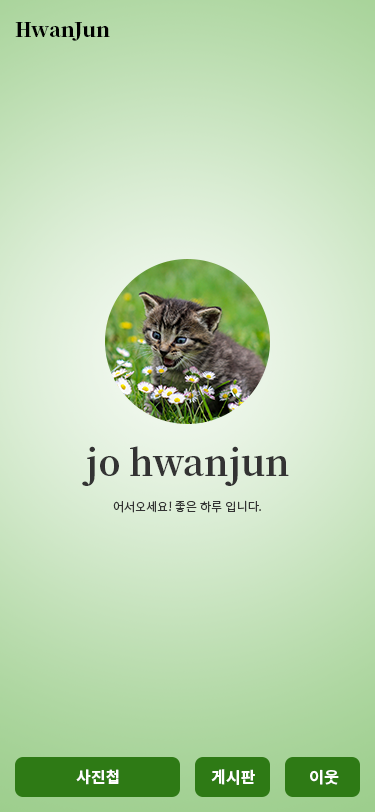
<style>
.page{position:relative;width:375px;height:812px}
.page>*{position:absolute;margin:0}
.t1{font:20px "NotoSerifKR-Black";color:#000000}
.t2{font:36px "NotoSerifKR-Bold";color:#333333}
.t3{font:12px "NotoSansKR-Regular";color:#333333}
.t4{font:16px "NotoSansKR-Bold";color:#ffffff}
</style>
<div class="page">
<p class="t1" style="left:15px;top:22px;width:95px;height:19px">HwanJun</p>
<p class="t2" style="left:82px;top:446px;width:207px;height:40px">jo hwanjun</p>
<p class="t3" style="left:113px;top:500px;width:148px;height:13px">어서오세요! 좋은 하루 입니다.</p>
<p class="t4" style="left:76px;top:769px;width:43px;height:16px">사진첩</p>
<p class="t4" style="left:211px;top:769px;width:44px;height:16px">게시판</p>
<p class="t4" style="left:310px;top:769px;width:29px;height:16px">이웃</p>
</div>
